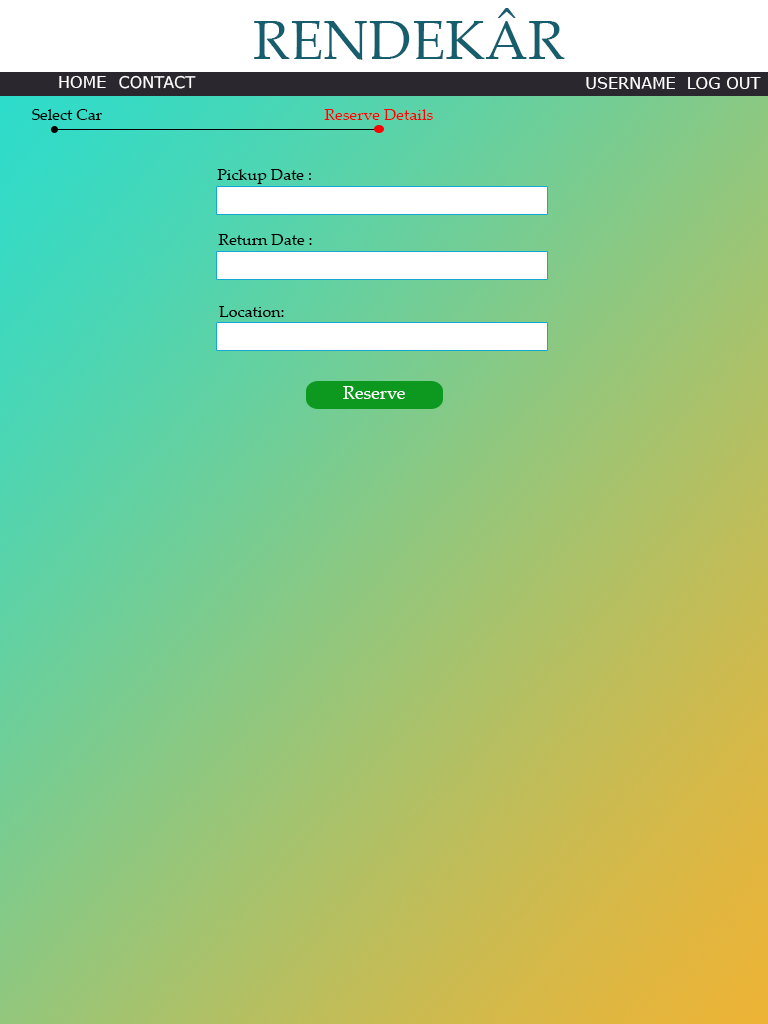
<style>
.page{position:relative;width:768px;height:1024px}
.page>*{position:absolute;margin:0}
.t1{font:55px "PalatinoLinotype-Roman";color:#165e6d}
.t2{font:16px "Verdana";color:#ffffff}
.t3{font:16px "PalatinoLinotype-Roman";color:#000000}
.t4{font:16px "PalatinoLinotype-Roman";color:#fc0101}
.t5{font:18px "PalatinoLinotype-Roman";color:#ffffff}
</style>
<div class="page">
<p class="t1" style="left:254px;top:8px;width:311px;height:52px">RENDEKÂR</p>
<p class="t2" style="left:59px;top:76px;width:47px;height:12px">HOME</p>
<p class="t2" style="left:119px;top:75px;width:77px;height:14px">CONTACT</p>
<p class="t2" style="left:586px;top:77px;width:89px;height:12px">USERNAME</p>
<p class="t2" style="left:688px;top:77px;width:73px;height:12px">LOG OUT</p>
<p class="t3" style="left:32px;top:109px;width:70px;height:11px">Select Car</p>
<p class="t4" style="left:324px;top:109px;width:109px;height:11px">Reserve Details</p>
<p class="t3" style="left:217px;top:169px;width:94px;height:15px">Pickup Date :</p>
<p class="t3" style="left:218px;top:234px;width:94px;height:11px">Return Date :</p>
<p class="t3" style="left:219px;top:306px;width:65px;height:11px">Location:</p>
<p class="t5" style="left:343px;top:386px;width:62px;height:13px">Reserve</p>
</div>
